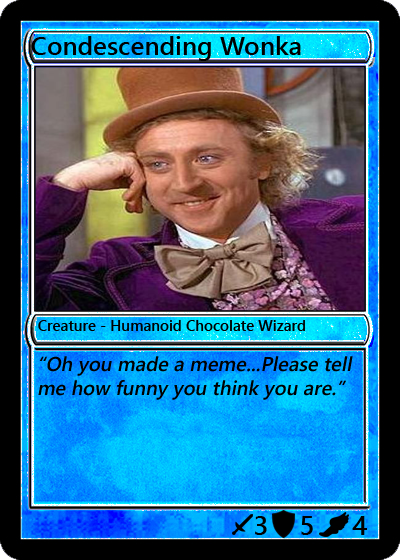
<style>
.page{position:relative;width:400px;height:560px}
.page>*{position:absolute;margin:0}
.t1{font:26px "YuGothicUI-Semibold";color:#000000}
.t2{font:15px "YuGothicUI-Semibold";color:#000000}
.t3{font:20px "YuGothicUI-Semibold";color:#000000;font-style:italic}
.t4{font:27px "YuGothicUI-Semibold";color:#000000}
</style>
<div class="page">
<p class="t1" style="left:31px;top:36px;width:270px;height:25px">Condescending Wonka</p>
<p class="t2" style="left:38px;top:320px;width:267px;height:11px">Creature - Humanoid Chocolate Wizard</p>
<p class="t3" style="left:38px;top:356px;width:315px;height:44px">“Oh you made a meme...Please tell me how funny you think you are.”</p>
<p class="t4" style="left:255px;top:516px;width:12px;height:19px">3</p>
<p class="t4" style="left:301px;top:516px;width:12px;height:19px">5</p>
<p class="t4" style="left:352px;top:516px;width:15px;height:19px">4</p>
</div>
